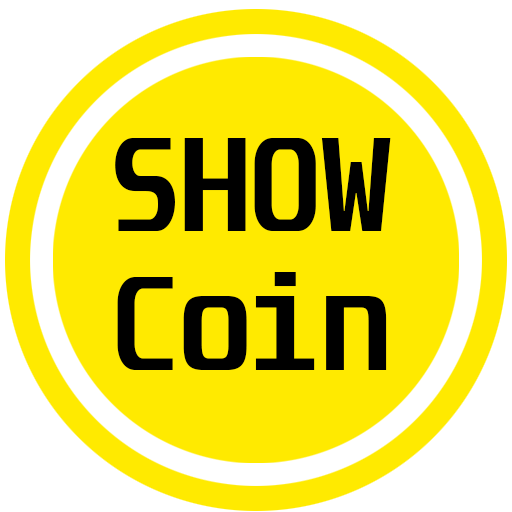
<style>
.page{position:relative;width:512px;height:512px;background:#ffea00}
.page>*{position:absolute;margin:0}
.t1{font:115.2px "Unispace-Bold";color:#000000}
</style>
<div class="page">
<p class="t1" style="left:115px;top:138px;width:276px;height:232px;text-align:right">SHOW<br>Coin</p>
</div>
